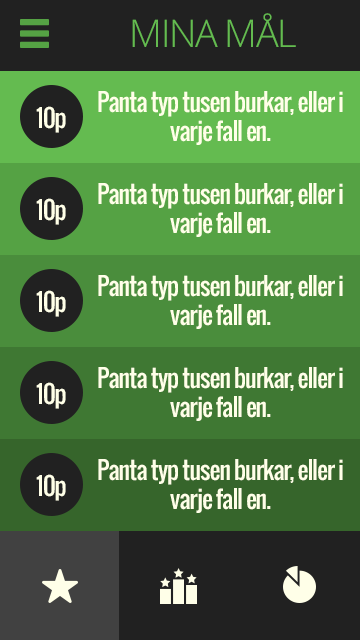
<style>
.page{position:relative;width:360px;height:640px;background:#212121}
.page>*{position:absolute;margin:0}
.t1{font:38px "OpenSans-Light";letter-spacing:-0.04em;color:#64bb50;text-transform:uppercase}
.t2{font:24px "Oswald-Regular";letter-spacing:-0.04em;color:#ffffe8}
</style>
<div class="page">
<p class="t1" style="left:132px;top:13px;width:164px;height:34px">Mina mål</p>
<p class="t2" style="left:98px;top:91px;width:245px;height:54px;text-align:center">Panta typ tusen burkar, eller i varje fall en.</p>
<p class="t2" style="left:36px;top:106px;width:30px;height:27px">10p</p>
<p class="t2" style="left:98px;top:183px;width:245px;height:54px;text-align:center">Panta typ tusen burkar, eller i varje fall en.</p>
<p class="t2" style="left:36px;top:198px;width:30px;height:27px">10p</p>
<p class="t2" style="left:98px;top:275px;width:245px;height:54px;text-align:center">Panta typ tusen burkar, eller i varje fall en.</p>
<p class="t2" style="left:36px;top:290px;width:30px;height:27px">10p</p>
<p class="t2" style="left:98px;top:367px;width:245px;height:54px;text-align:center">Panta typ tusen burkar, eller i varje fall en.</p>
<p class="t2" style="left:36px;top:382px;width:30px;height:27px">10p</p>
<p class="t2" style="left:98px;top:459px;width:245px;height:54px;text-align:center">Panta typ tusen burkar, eller i varje fall en.</p>
<p class="t2" style="left:36px;top:474px;width:30px;height:27px">10p</p>
</div>
